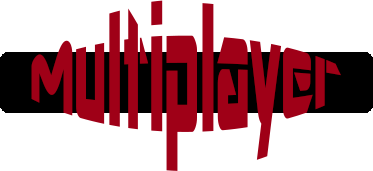
<style>
.page{position:relative;width:373px;height:171px;background:#ffffff}
.page>*{position:absolute;margin:0}
.t1{font:60px "ARDESTINE";color:#9f0017}
</style>
<div class="page">
<p class="t1" style="left:31px;top:0px;width:310px;height:171px;text-align:center">Multiplayer</p>
</div>
